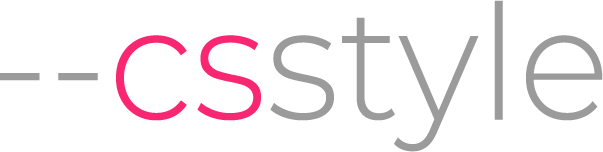
<style>
.page{position:relative;width:603px;height:152px;background:#ffffff}
.page>*{position:absolute;margin:0}
.t1{font:160px "Montserrat-Light";color:#9b9b9b;scale:0.95 1}
.t2{font:160px "Montserrat-Light";color:#f92672;scale:0.95 1}
</style>
<div class="page">
<p class="t1" style="left:0px;top:0px;width:603px;height:152px">--<span class="t2">cs</span>style</p>
</div>
